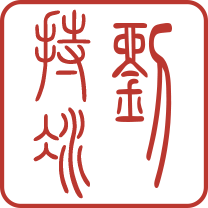
<style>
.page{position:relative;width:208px;height:208px;background:#ffffff}
.page>*{position:absolute;margin:0}
.t1{font:99.8px "HYj1gf";color:#ba372f}
</style>
<div class="page">
<p class="t1" style="left:35px;top:9px;width:56px;height:93px">持</p>
<p class="t1" style="left:33px;top:107px;width:57px;height:92px">冰</p>
</div>
